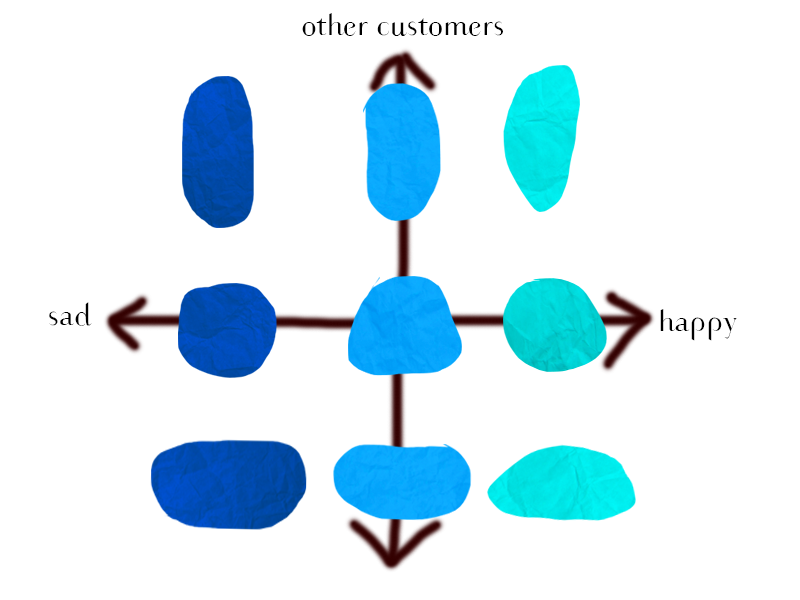
<style>
.page{position:relative;width:800px;height:600px;background:#ffffff}
.page>*{position:absolute;margin:0}
.t1{font:30px "Karmaform";color:#000000}
</style>
<div class="page">
<p class="t1" style="left:302px;top:13px;width:201px;height:23px">other customers</p>
<p class="t1" style="left:49px;top:302px;width:43px;height:24px">sad</p>
<p class="t1" style="left:660px;top:309px;width:77px;height:32px">happy</p>
</div>
